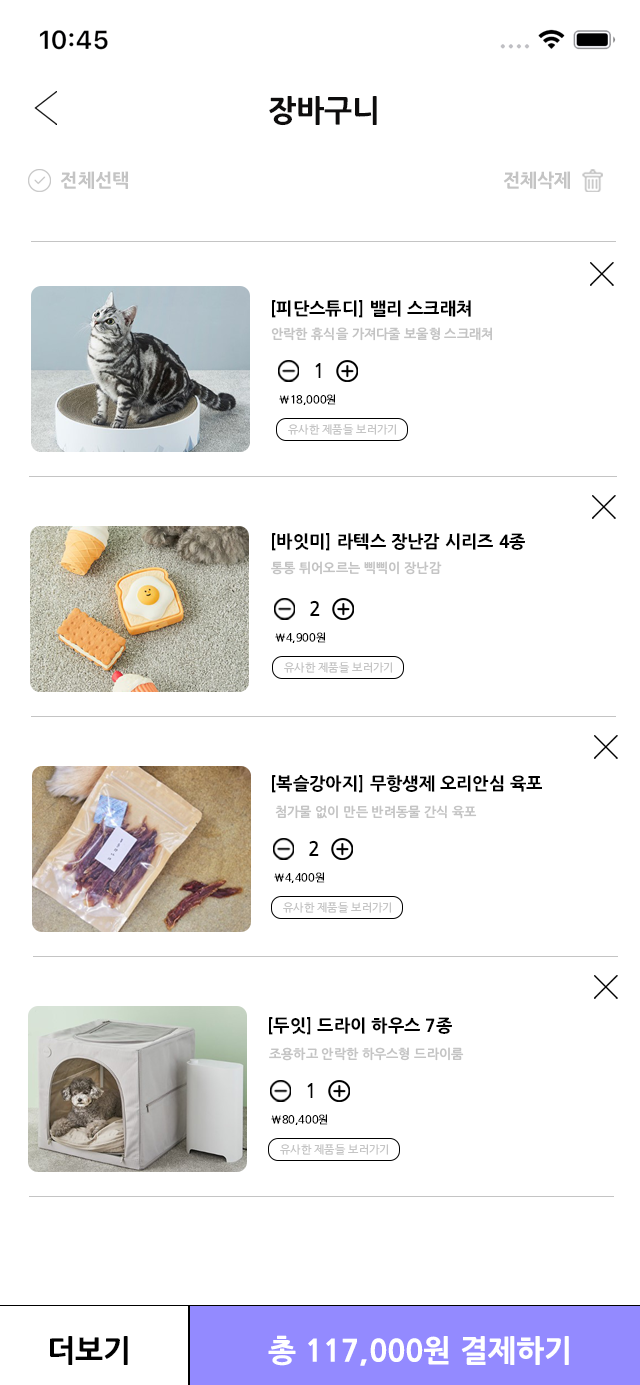
<style>
.page{position:relative;width:640px;height:1385px;background:#ffffff}
.page>*{position:absolute;margin:0}
.t1{font:30px "NanumGothicOTFExtraBold";color:#0d0c0c}
.t2{font:18.3px "NanumGothicOTFExtraBold";color:#c4c4c4}
.t3{font:17.4px "NanumGothicOTFExtraBold";color:#000000}
.t4{font:13px "NanumGothicOTFBold";color:#c4c4c4}
.t5{font:19.8px "NanumGothicOTFBold";color:#010101}
.t6{font:11px "NanumGothicOTF";color:#000000}
.t7{font:11px "NanumGothicOTF";color:#c4c4c4}
.t8{font:30px "NanumGothicOTFExtraBold";color:#000000}
.t9{font:30px "NanumGothicOTFExtraBold";color:#ffffff}
</style>
<div class="page">
<p class="t1" style="left:269px;top:96px;width:108px;height:30px">장바구니</p>
<p class="t2" style="left:60px;top:171px;width:68px;height:18px">전체선택</p>
<p class="t2" style="left:503px;top:171px;width:67px;height:18px">전체삭제</p>
<p class="t3" style="left:272px;top:300px;width:199px;height:18px">[피단스튜디] 밸리 스크래쳐</p>
<p class="t4" style="left:271px;top:327px;width:221px;height:14px">안락한 휴식을 가져다줄 보울형 스크래쳐</p>
<p class="t5" style="left:315px;top:363px;width:6px;height:15px">1</p>
<p class="t6" style="left:279px;top:394px;width:57px;height:11px">\18,000원</p>
<p class="t7" style="left:288px;top:424px;width:108px;height:11px">유사한 제품들 보러가기</p>
<p class="t3" style="left:272px;top:533px;width:253px;height:18px">[바잇미] 라텍스 장난감 시리즈 4종</p>
<p class="t4" style="left:271px;top:561px;width:171px;height:14px">통통 튀어오르는 삑삑이 장난감</p>
<p class="t5" style="left:310px;top:600px;width:10px;height:16px">2</p>
<p class="t6" style="left:275px;top:632px;width:51px;height:11px">\4,900원</p>
<p class="t7" style="left:284px;top:662px;width:108px;height:11px">유사한 제품들 보러가기</p>
<p class="t3" style="left:272px;top:775px;width:270px;height:18px">[복슬강아지] 무항생제 오리안심 육포</p>
<p class="t4" style="left:275px;top:805px;width:202px;height:14px">첨가물 없이 만든 반려동물 간식 육포</p>
<p class="t5" style="left:309px;top:840px;width:10px;height:16px">2</p>
<p class="t6" style="left:274px;top:872px;width:51px;height:11px">\4,400원</p>
<p class="t7" style="left:283px;top:902px;width:108px;height:11px">유사한 제품들 보러가기</p>
<p class="t3" style="left:269px;top:1017px;width:183px;height:18px">[두잇] 드라이 하우스 7종</p>
<p class="t4" style="left:269px;top:1047px;width:195px;height:14px">조용하고 안락한 하우스형 드라이룸</p>
<p class="t5" style="left:307px;top:1083px;width:6px;height:15px">1</p>
<p class="t6" style="left:271px;top:1114px;width:57px;height:11px">\80,400원</p>
<p class="t7" style="left:280px;top:1144px;width:108px;height:11px">유사한 제품들 보러가기</p>
<p class="t8" style="left:50px;top:1336px;width:78px;height:29px">더보기</p>
<p class="t9" style="left:268px;top:1335px;width:301px;height:31px">총 117,000원 결제하기</p>
</div>
